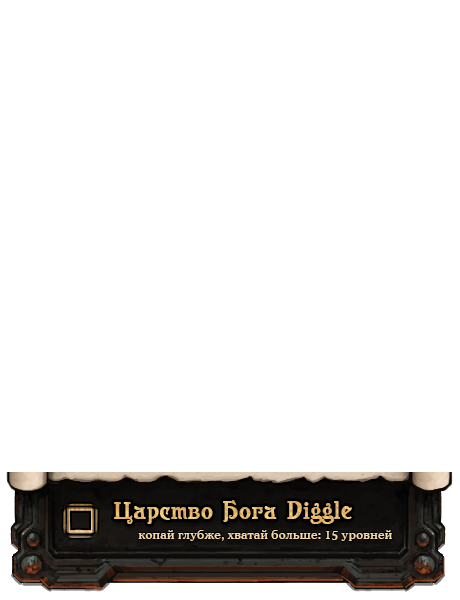
<style>
.page{position:relative;width:460px;height:600px;background:#ffffff}
.page>*{position:absolute;margin:0}
.t1{font:25px "Casanova";letter-spacing:0.025em;color:#e6b96d}
.t2{font:12px "CooperMediumCBT";letter-spacing:0.025em;color:#f6d7a7}
</style>
<div class="page">
<p class="t1" style="left:114px;top:500px;width:238px;height:24px">Царство Бога Diggle</p>
<p class="t2" style="left:138px;top:530px;width:254px;height:11px">копай глубже, хватай больше: 15 уровней</p>
</div>
